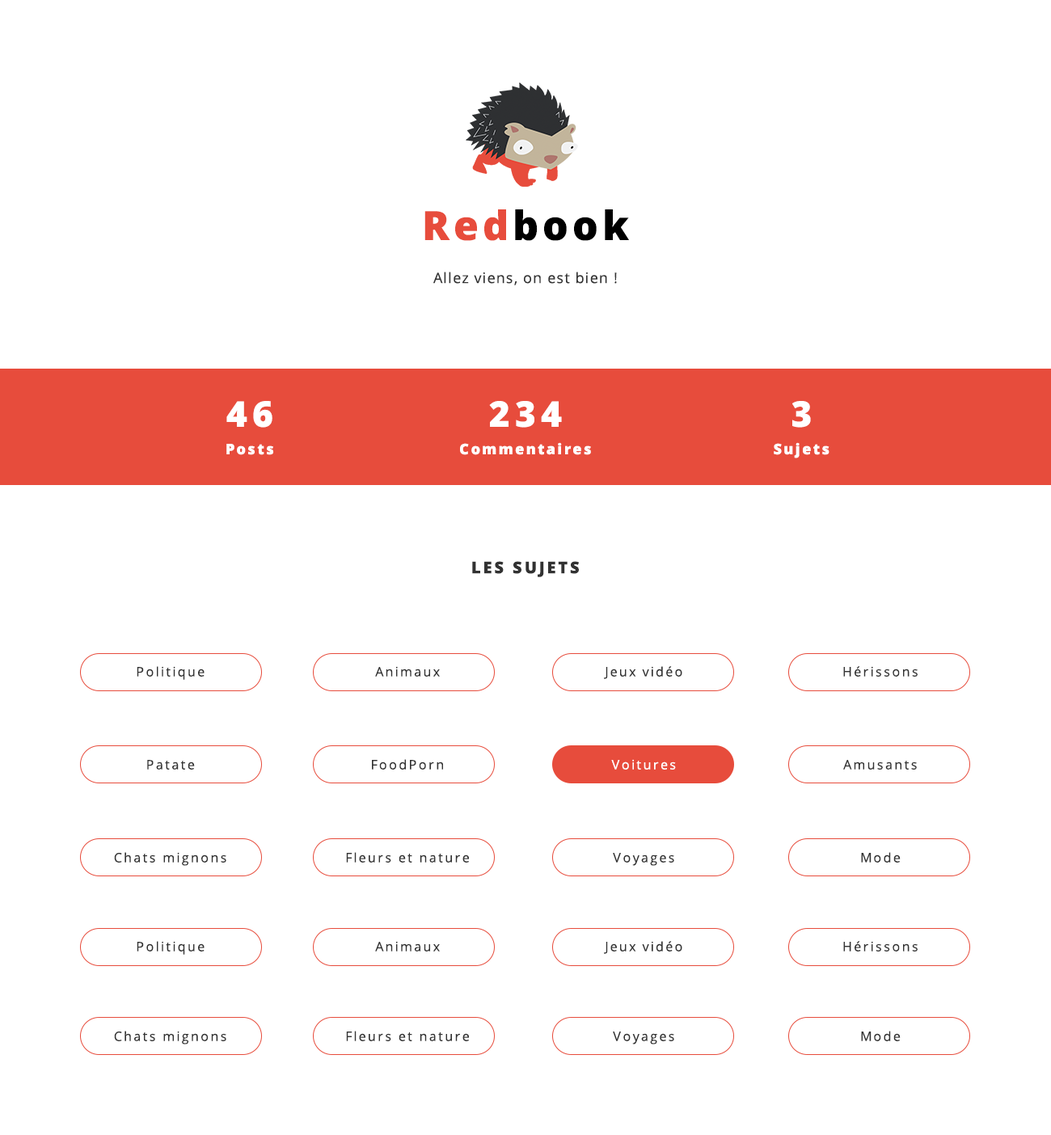
<style>
.page{position:relative;width:1051px;height:1135px;background:#ffffff}
.page>*{position:absolute;margin:0}
.t1{font:40.4px "OpenSans-Extrabold";letter-spacing:0.1em;color:#000000}
.t2{font:40.4px "OpenSans-Extrabold";letter-spacing:0.1em;color:#e74c3c}
.t3{font:14.5px "OpenSans";letter-spacing:0.06em;color:#323232}
.t4{font:14.5px/27.5px "OpenSans-Extrabold";letter-spacing:0.14em;color:#ffffff}
.t5{font:35.6px/27.5px "OpenSans-Extrabold";letter-spacing:0.14em;color:#ffffff}
.t6{font:16.2px "OpenSans-Extrabold";letter-spacing:0.14em;color:#323232;text-transform:uppercase}
.t7{font:12.9px "OpenSans";letter-spacing:0.14em;color:#323232}
.t8{font:12.9px "OpenSans";letter-spacing:0.14em;color:#ffffff}
</style>
<div class="page">
<p class="t1" style="left:424px;top:209px;width:205px;height:32px"><span class="t2">Red</span>book</p>
<p class="t3" style="left:433px;top:272px;width:184px;height:13px">Allez viens, on est bien !</p>
<p class="t4" style="left:226px;top:401px;width:47px;height:54px;text-align:center"><span class="t5">46<br></span>Posts</p>
<p class="t4" style="left:460px;top:401px;width:131px;height:54px;text-align:center"><span class="t5">234<br></span>Commentaires</p>
<p class="t4" style="left:774px;top:401px;width:55px;height:57px;text-align:center"><span class="t5">3<br></span>Sujets</p>
<p class="t6" style="left:472px;top:561px;width:107px;height:16px">Les sujets</p>
<p class="t7" style="left:137px;top:666px;width:67px;height:14px">Politique</p>
<p class="t7" style="left:375px;top:666px;width:65px;height:11px">Animaux</p>
<p class="t7" style="left:604px;top:666px;width:78px;height:13px">Jeux vidéo</p>
<p class="t7" style="left:843px;top:666px;width:74px;height:11px">Hérissons</p>
<p class="t7" style="left:147px;top:760px;width:48px;height:9px">Patate</p>
<p class="t7" style="left:372px;top:759px;width:71px;height:10px">FoodPorn</p>
<p class="t8" style="left:611px;top:759px;width:65px;height:10px">Voitures</p>
<p class="t7" style="left:843px;top:760px;width:74px;height:9px">Amusants</p>
<p class="t7" style="left:114px;top:852px;width:112px;height:14px">Chats mignons</p>
<p class="t7" style="left:346px;top:852px;width:123px;height:10px">Fleurs et nature</p>
<p class="t7" style="left:613px;top:853px;width:61px;height:13px">Voyages</p>
<p class="t7" style="left:861px;top:852px;width:39px;height:10px">Mode</p>
<p class="t7" style="left:137px;top:941px;width:67px;height:14px">Politique</p>
<p class="t7" style="left:375px;top:941px;width:65px;height:10px">Animaux</p>
<p class="t7" style="left:604px;top:941px;width:78px;height:13px">Jeux vidéo</p>
<p class="t7" style="left:843px;top:941px;width:74px;height:10px">Hérissons</p>
<p class="t7" style="left:114px;top:1031px;width:112px;height:13px">Chats mignons</p>
<p class="t7" style="left:346px;top:1031px;width:123px;height:10px">Fleurs et nature</p>
<p class="t7" style="left:613px;top:1031px;width:61px;height:13px">Voyages</p>
<p class="t7" style="left:861px;top:1031px;width:39px;height:10px">Mode</p>
</div>
